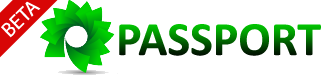
<style>
.page{position:relative;width:325px;height:77px;background:#ffffff}
.page>*{position:absolute;margin:0}
.t1{font:20.7px "MyriadPro-Regular";color:#ffffff}
.t2{font:48px "Calibri-Bold"}
</style>
<div class="page">
<p class="t1" style="left:1px;top:1px;width:40px;height:37px;rotate:-44deg">BETA</p>
<p class="t2" style="left:119px;top:24px;width:202px;height:32px">PASSPORT</p>
</div>
